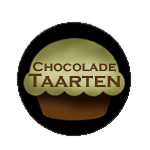
<style>
.page{position:relative;width:150px;height:150px;background:#ffffff}
.page>*{position:absolute;margin:0}
.t1{font:13.3px "CopperplateGothic-Bold";color:#623812}
.t2{font:20px "CopperplateGothic-Bold";color:#623812}
</style>
<div class="page">
<p class="t1" style="left:33px;top:62px;width:83px;height:10px">Chocolade</p>
<p class="t2" style="left:28px;top:73px;width:93px;height:15px">Taarten</p>
</div>
